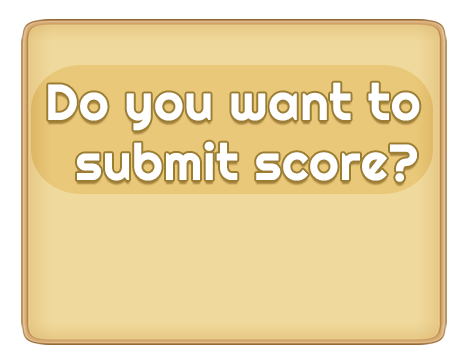
<style>
.page{position:relative;width:466px;height:362px;background:#f0d99c}
.page>*{position:absolute;margin:0}
.t1{font:50.6px/60px "Righteous-Regular";letter-spacing:0.02em;color:#ffffff}
</style>
<div class="page">
<p class="t1" style="left:48px;top:82px;width:372px;height:100px">Do you want to<br>  submit score?</p>
</div>
